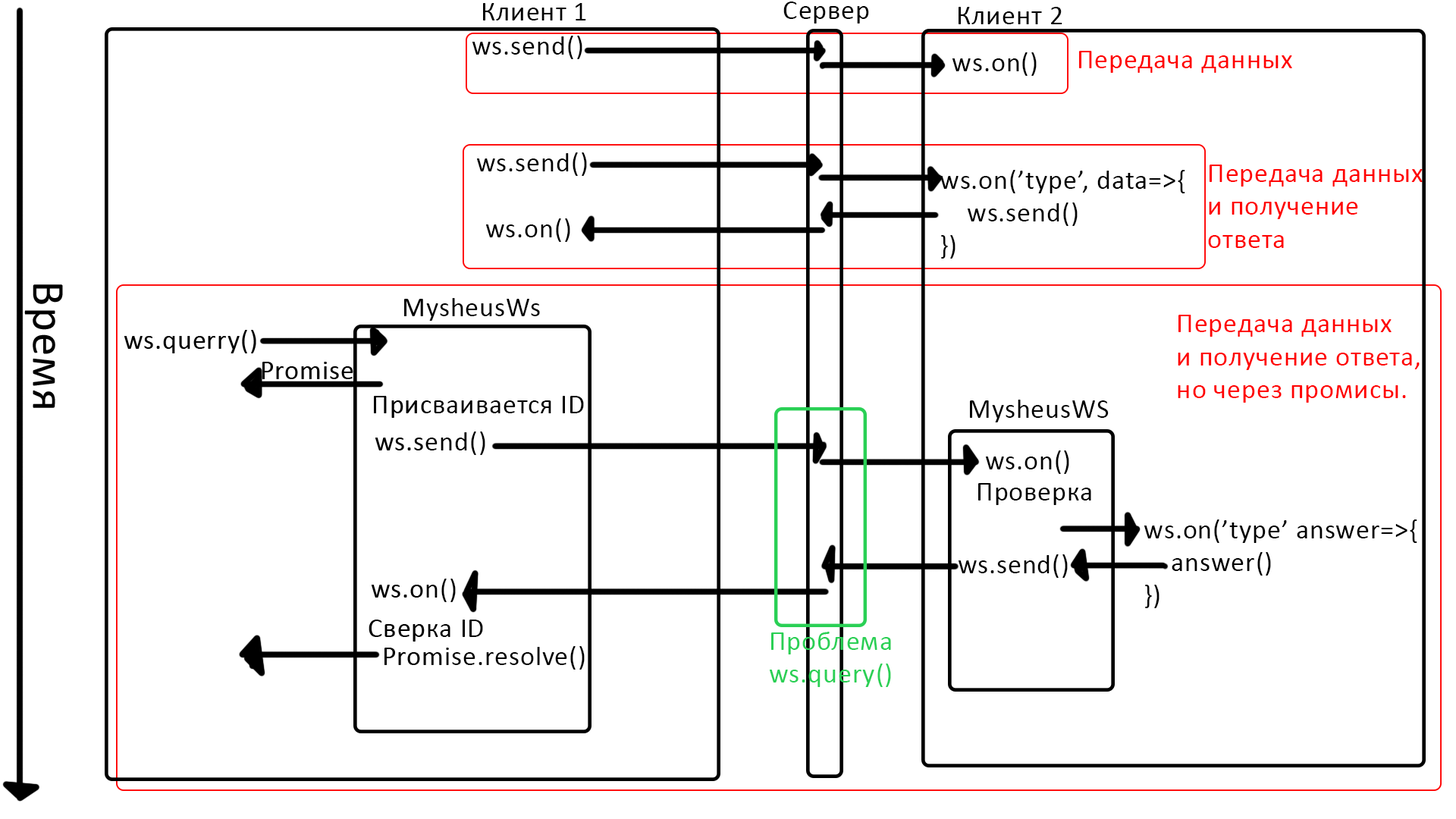
<style>
.page{position:relative;width:1456px;height:819px;background:#ffffff}
.page>*{position:absolute;margin:0}
.t1{font:27.3px "Calibri";letter-spacing:0.025em;color:#000000}
.t2{font:27.3px "Calibri";letter-spacing:0.025em;color:#ff0000}
.t3{font:46.7px "Calibri";letter-spacing:0.025em;color:#000000}
.t4{font:27.3px "Calibri";letter-spacing:0.025em;color:#2ad055}
</style>
<div class="page">
<p class="t1" style="left:483px;top:3px;width:103px;height:17px">Клиент 1</p>
<p class="t1" style="left:783px;top:2px;width:86px;height:22px">Сервер</p>
<p class="t1" style="left:959px;top:7px;width:103px;height:17px">Клиент 2</p>
<p class="t1" style="left:472px;top:36px;width:110px;height:23px">ws.send()</p>
<p class="t1" style="left:952px;top:52px;width:85px;height:24px">ws.on()</p>
<p class="t2" style="left:1079px;top:51px;width:213px;height:22px">Передача данных</p>
<p class="t1" style="left:477px;top:152px;width:110px;height:24px">ws.send()</p>
<p class="t1" style="left:940px;top:170px;width:245px;height:89px">ws.on(’type’, data=&gt;{<br> ws.send()<br>})</p>
<p class="t2" style="left:1208px;top:165px;width:215px;height:83px">Передача данных<br>и получение<br>ответа</p>
<p class="t1" style="left:486px;top:218px;width:84px;height:24px">ws.on()</p>
<p class="t3" style="left:24px;top:284px;width:39px;height:124px;rotate:90deg">Время</p>
<p class="t1" style="left:404px;top:298px;width:136px;height:23px">MysheusWs</p>
<p class="t2" style="left:1178px;top:315px;width:242px;height:88px">Передача данных<br>и получение ответа,<br>но через промисы.</p>
<p class="t1" style="left:124px;top:330px;width:132px;height:23px">ws.querry()</p>
<p class="t1" style="left:262px;top:362px;width:91px;height:17px">Promise</p>
<p class="t1" style="left:374px;top:396px;width:210px;height:22px">Присваивается ID</p>
<p class="t1" style="left:970px;top:400px;width:139px;height:22px">MysheusWS</p>
<p class="t1" style="left:375px;top:431px;width:110px;height:24px">ws.send()</p>
<p class="t1" style="left:986px;top:450px;width:83px;height:24px">ws.on()</p>
<p class="t1" style="left:978px;top:483px;width:113px;height:22px">Проверка</p>
<p class="t1" style="left:1144px;top:519px;width:273px;height:89px">ws.on(’type’ answer=&gt;{<br> answer()<br>})</p>
<p class="t1" style="left:959px;top:554px;width:109px;height:24px">ws.send()</p>
<p class="t1" style="left:372px;top:579px;width:84px;height:23px">ws.on()</p>
<p class="t1" style="left:369px;top:620px;width:114px;height:22px">Сверка ID</p>
<p class="t4" style="left:770px;top:632px;width:121px;height:55px">Проблема<br>ws.query()</p>
<p class="t1" style="left:384px;top:646px;width:201px;height:24px">Promise.resolve()</p>
</div>
